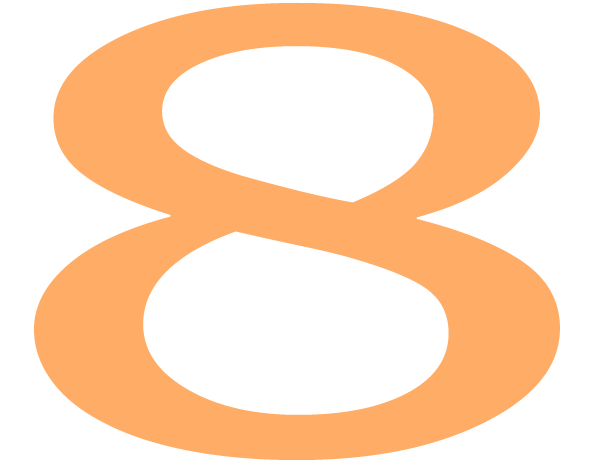
<style>
.page{position:relative;width:600px;height:462px;background:#ffffff}
.page>*{position:absolute;margin:0}
.t1{font:604.2px "Tahoma";color:#ffad66;scale:1.84 1}
</style>
<div class="page">
<p class="t1" style="left:34px;top:2px;width:526px;height:458px">8</p>
</div>
